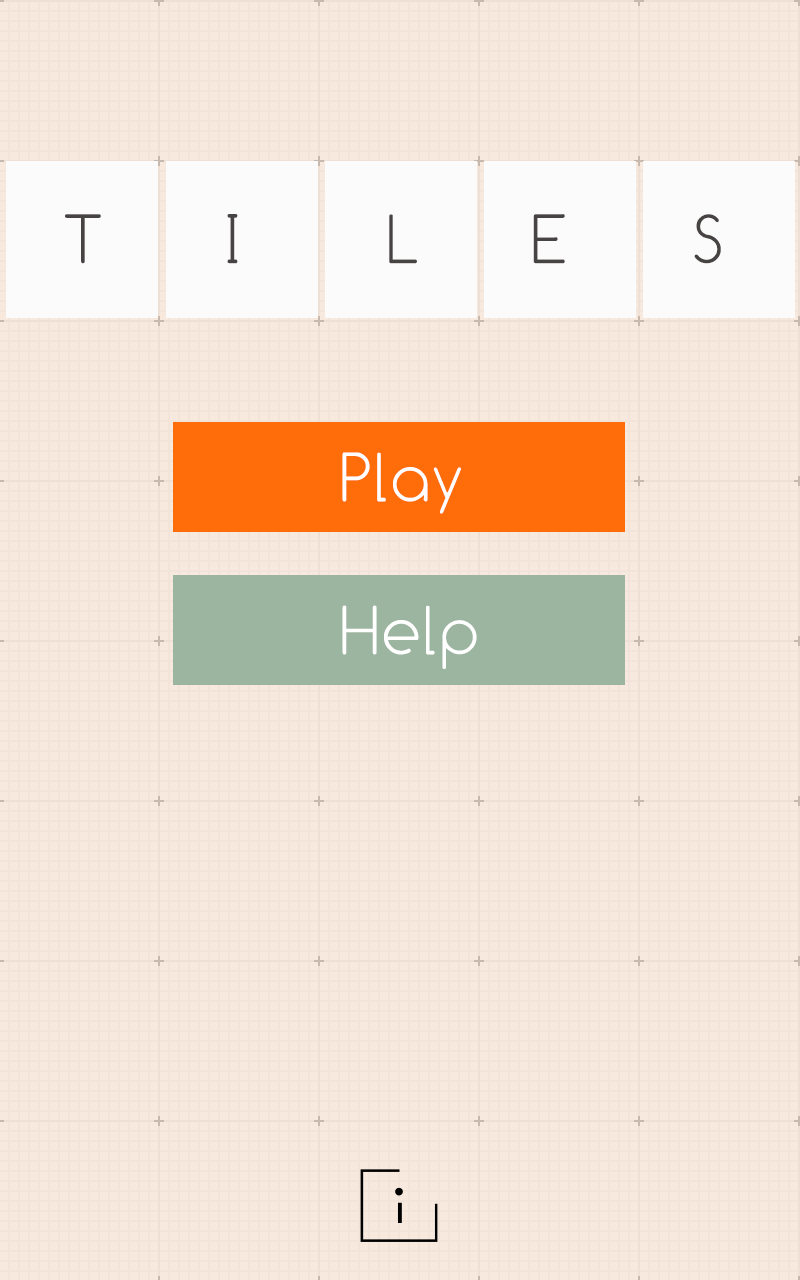
<style>
.page{position:relative;width:800px;height:1280px;background:#f2e4d8}
.page>*{position:absolute;margin:0}
.t1{font:72px "Comfortaa-Thin";color:#474343}
.t2{font:72px "Comfortaa-Thin";color:#ffffff}
</style>
<div class="page">
<p class="t1" style="left:65px;top:214px;width:656px;height:50px">T    I    L    E    S</p>
<p class="t2" style="left:342px;top:452px;width:119px;height:62px">Play</p>
<p class="t2" style="left:342px;top:605px;width:135px;height:64px">Help</p>
</div>
